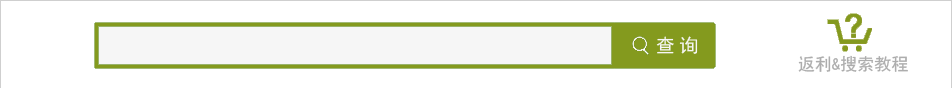
<style>
.page{position:relative;width:952px;height:88px;background:#ffffff}
.page>*{position:absolute;margin:0}
.t1{font:19px "SimHei";color:#f6f6f6}
.t2{font:17px "SimHei";color:#adadad}
</style>
<div class="page">
<p class="t1" style="left:656px;top:36px;width:42px;height:18px">查询</p>
<p class="t2" style="left:798px;top:55px;width:110px;height:17px">返利&amp;搜索教程</p>
</div>
